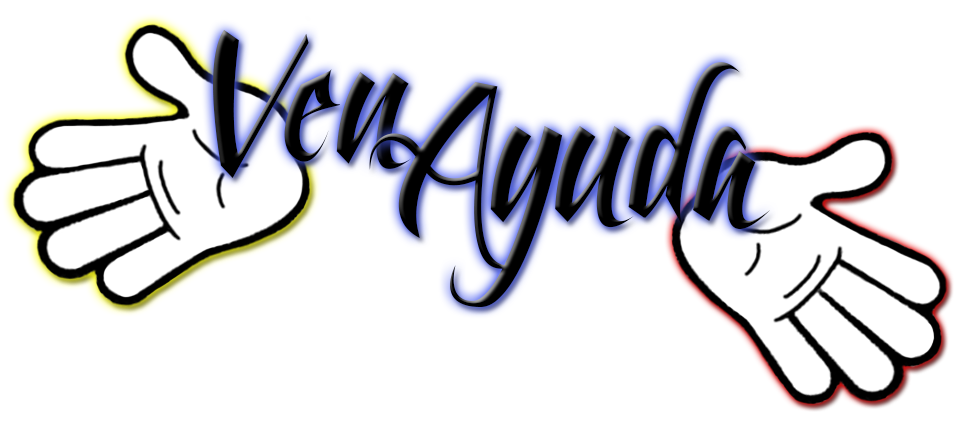
<style>
.page{position:relative;width:960px;height:440px;background:#ffffff}
.page>*{position:absolute;margin:0}
.t1{font:168.4px "FeathergraphyClean";color:#000000}
.t2{font:177px "FeathergraphyClean";color:#000000}
</style>
<div class="page">
<p class="t1" style="left:213px;top:30px;width:199px;height:148px">Ven</p>
<p class="t2" style="left:369px;top:62px;width:401px;height:245px">Ayuda</p>
</div>
